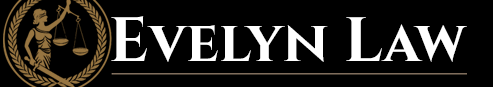
<style>
.page{position:relative;width:493px;height:87px;background:#000000}
.page>*{position:absolute;margin:0}
.t1{font:58.3px "Cinzel-Bold";color:#ffffff}
.t2{font:62.5px "Cinzel-Bold";color:#ffffff}
</style>
<div class="page">
<p class="t1" style="left:111px;top:16px;width:356px;height:46px"><span class="t2">E</span>velyn<span class="t2"> L</span>aw</p>
</div>
